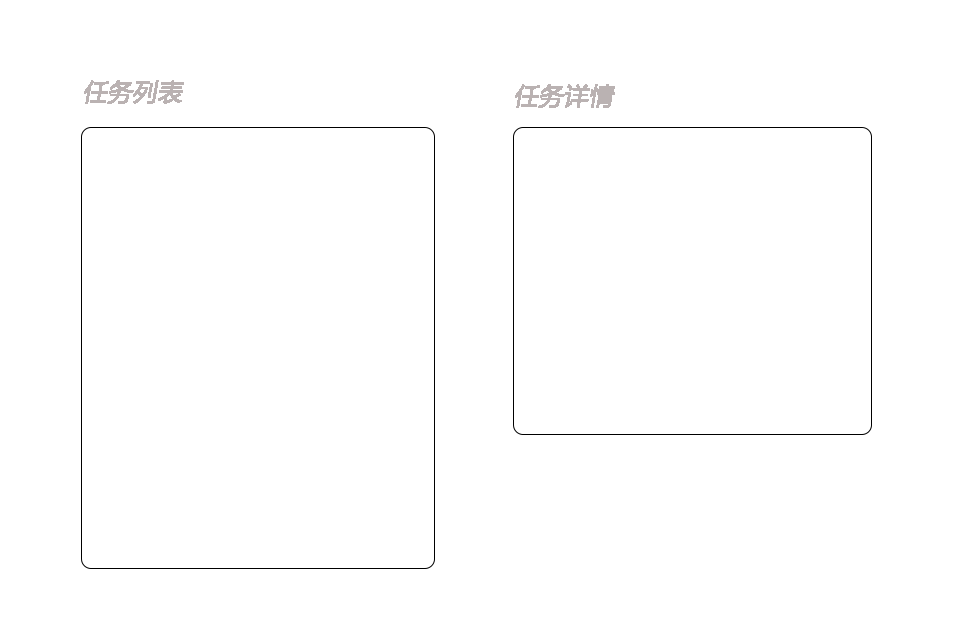
<style>
.page{position:relative;width:960px;height:640px;background:#ffffff}
.page>*{position:absolute;margin:0}
.t1{font:24px "MicrosoftYaHei";color:#bab2b2;font-weight:bold;font-style:italic}
</style>
<div class="page">
<p class="t1" style="left:84px;top:80px;width:100px;height:24px">任务列表</p>
<p class="t1" style="left:515px;top:84px;width:100px;height:24px">任务详情</p>
</div>
